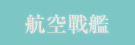
<style>
.page{position:relative;width:135px;height:45px;background:#7dc6c6}
.page>*{position:absolute;margin:0}
.t1{font:21px "RyuminPro-Medium";color:#f4e6df}
</style>
<div class="page">
<p class="t1" style="left:25px;top:14px;width:84px;height:20px">航空戰艦</p>
</div>
